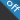
<style>
.page{position:relative;width:20px;height:20px;background:#333333}
.page>*{position:absolute;margin:0}
.t1{font:9px "Tahoma";color:#ffffff;scale:1.33 1}
</style>
<div class="page">
<p class="t1" style="left:4px;top:0px;width:18px;height:15px;rotate:45deg">off</p>
</div>
